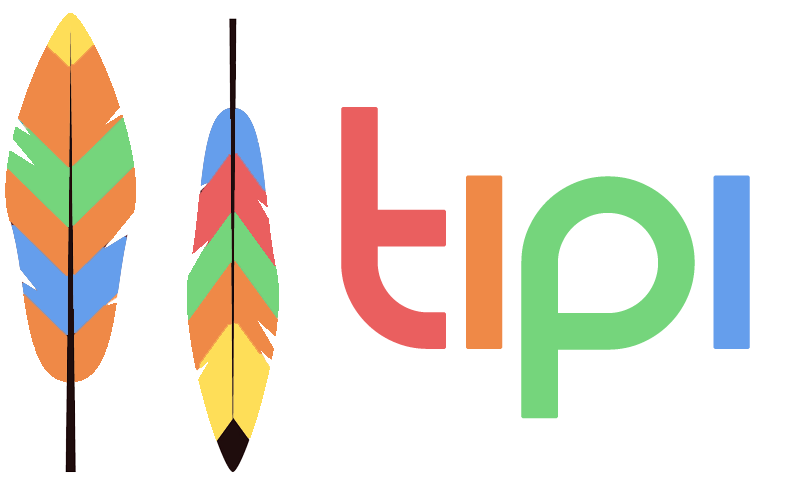
<style>
.page{position:relative;width:800px;height:480px;background:#ffffff}
.page>*{position:absolute;margin:0}
.t1{font:380px "REZ";color:#ea5f5f;font-weight:bold}
.t2{font:380px "REZ";color:#ef8947;font-weight:bold}
.t3{font:380px "REZ";color:#75d57c;font-weight:bold}
.t4{font:380px "REZ";color:#659eec;font-weight:bold}
</style>
<div class="page">
<p class="t1" style="left:341px;top:107px;width:409px;height:312px">T<span class="t2">i</span><span class="t3">p</span><span class="t4">i</span></p>
</div>
